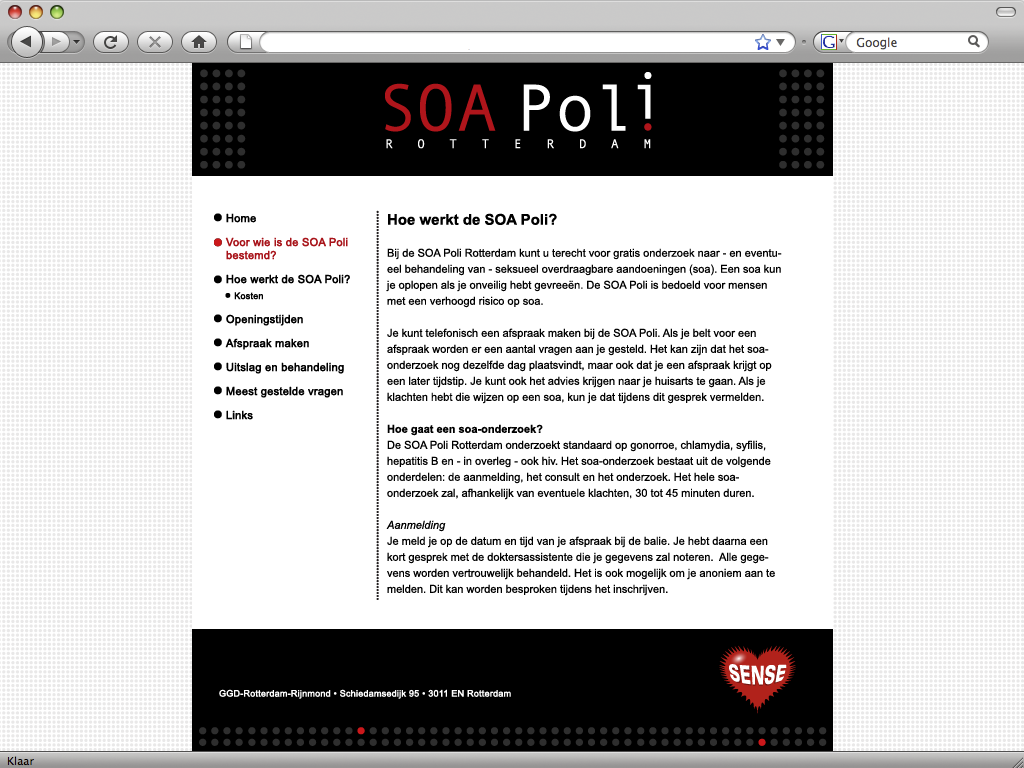
<style>
.page{position:relative;width:1024px;height:768px;background:#ffffff}
.page>*{position:absolute;margin:0}
.t1{font:11px/24px "ArialMT";color:#000000;font-weight:bold}
.t2{font:11px/24px "ArialMT";color:#a8141a;font-weight:bold}
.t3{font:11px/13px "ArialMT";color:#a8141a;font-weight:bold}
.t4{font:9px/16px "ArialMT";color:#000000;font-weight:bold}
.t5{font:11px/16px "ArialMT";color:#000000}
.t6{font:15px/16px "Arial-BoldMT";color:#000000}
.t7{font:11px/16px "Arial-BoldMT";color:#000000}
.t8{font:11px/16px "Arial-ItalicMT";color:#000000}
.t9{font:9px "ArialMT";color:#ffffff;font-weight:bold}
</style>
<div class="page">
<p class="t1" style="left:225px;top:213px;width:125px;height:207px">Home<br><span class="t2">Voor wie is de SOA Poli <br></span><span class="t3">bestemd?<br></span>Hoe werkt de SOA Poli?<br><span class="t4">   Kosten<br></span>Openingstijden<br>Afspraak maken<br>Uitslag en behandeling<br>Meest gestelde vragen<br>Links</p>
<p class="t5" style="left:386px;top:213px;width:396px;height:383px"><span class="t6">Hoe werkt de SOA Poli?<br></span><br>Bij de SOA Poli Rotterdam kunt u terecht voor gratis onderzoek naar - en eventueel behandeling van - seksueel overdraagbare aandoeningen (soa). Een soa kun je oplopen als je onveilig hebt gevreeën. De SOA Poli is bedoeld voor mensen met een verhoogd risico op soa. <br><br>Je kunt telefonisch een afspraak maken bij de SOA Poli. Als je belt voor een afspraak worden er een aantal vragen aan je gesteld. Het kan zijn dat het soa-onderzoek nog dezelfde dag plaatsvindt, maar ook dat je een afspraak krijgt op een later tijdstip. Je kunt ook het advies krijgen naar je huisarts te gaan. Als je klachten hebt die wijzen op een soa, kun je dat tijdens dit gesprek vermelden.<br><br><span class="t7">Hoe gaat een soa-onderzoek? <br></span>De SOA Poli Rotterdam onderzoekt standaard op gonorroe, chlamydia, syfilis, hepatitis B en - in overleg - ook hiv. Het soa-onderzoek bestaat uit de volgende onderdelen: de aanmelding, het consult en het onderzoek. Het hele soa-onderzoek zal, afhankelijk van eventuele klachten, 30 tot 45 minuten duren. <br><br><span class="t8">Aanmelding<br></span>Je meld je op de datum en tijd van je afspraak bij de balie. Je hebt daarna een kort gesprek met de doktersassistente die je gegevens zal noteren.  Alle gegevens worden vertrouwelijk behandeld. Het is ook mogelijk om je anoniem aan te melden. Dit kan worden besproken tijdens het inschrijven. <br><br>• Consult<br>Na de aanmelding heb je een gesprek met de soa-verpleegkundige. In dit gesprek wordt gevraagd naar de reden van je komst en eventuele klachten. <br><br>• Onderzoek<br>Tijdens het consult wordt bepaald welk onderzoek nodig is. Dit kan een zelftest of een lichamelijk onderzoek zijn.</p>
<p class="t9" style="left:219px;top:689px;width:292px;height:10px">GGD-Rotterdam-Rijnmond • Schiedamsedijk 95 • 3011 EN Rotterdam</p>
</div>
